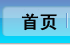
<style>
.page{position:relative;width:70px;height:45px}
.page>*{position:absolute;margin:0}
.t1{font:18px "SimHei";letter-spacing:0.04em;color:#040404;font-weight:bold}
</style>
<div class="page">
<p class="t1" style="left:21px;top:13px;width:36px;height:18px">首页</p>
</div>
